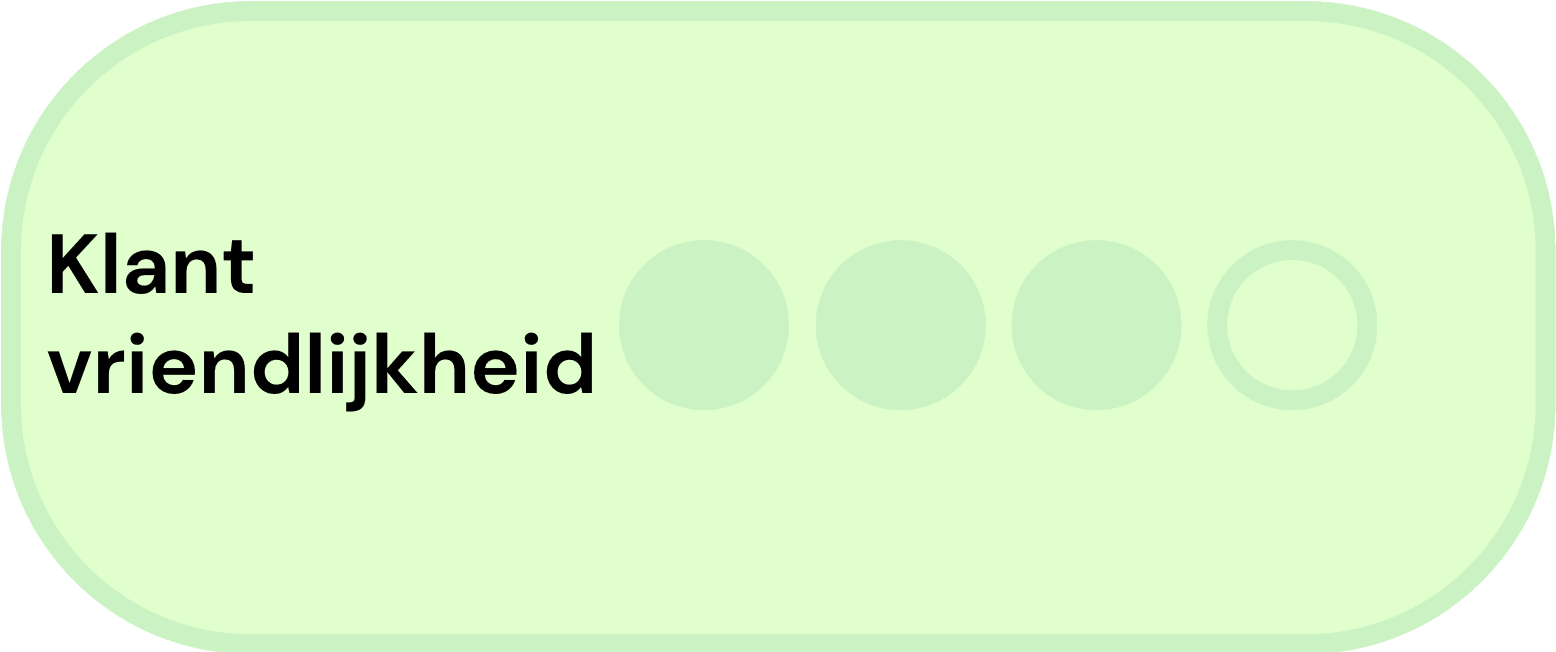
<style>
.page{position:relative;width:1556px;height:652px;background:#e0ffcc}
.page>*{position:absolute;margin:0}
.t1{font:84px "DMSans-Bold";color:#000000}
</style>
<div class="page">
<p class="t1" style="left:47px;top:232px;width:545px;height:180px">Klant<br>vriendlijkheid</p>
</div>
